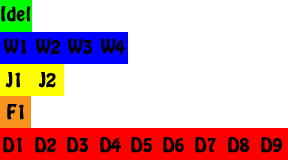
<style>
.page{position:relative;width:288px;height:160px;background:#ffffff}
.page>*{position:absolute;margin:0}
.t1{font:17px "HoboStd";color:#000000;font-weight:bold}
</style>
<div class="page">
<p class="t1" style="left:1px;top:6px;width:30px;height:16px">Idel</p>
<p class="t1" style="left:4px;top:39px;width:22px;height:16px">W1</p>
<p class="t1" style="left:36px;top:39px;width:24px;height:16px">W2</p>
<p class="t1" style="left:68px;top:39px;width:24px;height:16px">W3</p>
<p class="t1" style="left:101px;top:39px;width:24px;height:16px">W4</p>
<p class="t1" style="left:5px;top:72px;width:15px;height:16px">J1</p>
<p class="t1" style="left:38px;top:72px;width:18px;height:16px">J2</p>
<p class="t1" style="left:7px;top:104px;width:17px;height:16px">F1</p>
<p class="t1" style="left:3px;top:137px;width:19px;height:16px">D1</p>
<p class="t1" style="left:35px;top:137px;width:21px;height:16px">D2</p>
<p class="t1" style="left:67px;top:137px;width:21px;height:16px">D3</p>
<p class="t1" style="left:100px;top:137px;width:21px;height:16px">D4</p>
<p class="t1" style="left:131px;top:137px;width:21px;height:16px">D5</p>
<p class="t1" style="left:163px;top:137px;width:21px;height:16px">D6</p>
<p class="t1" style="left:195px;top:137px;width:21px;height:16px">D7</p>
<p class="t1" style="left:228px;top:137px;width:22px;height:16px">D8</p>
<p class="t1" style="left:261px;top:137px;width:21px;height:16px">D9</p>
</div>
